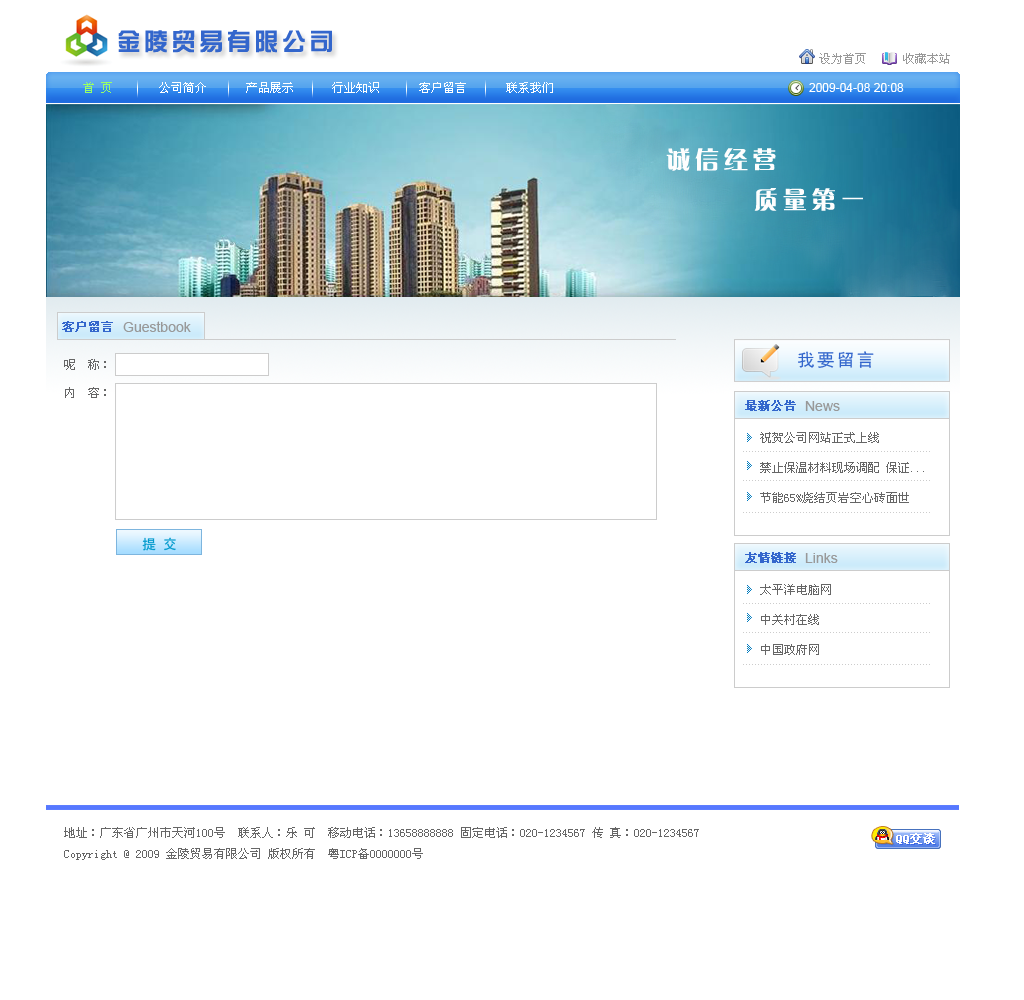
<style>
.page{position:relative;width:1024px;height:1000px;background:#ffffff}
.page>*{position:absolute;margin:0}
.t1{font:24px "HYk1gj";letter-spacing:0.15em;color:#3366cc}
.t2{font:12px "SimSun";color:#999999}
.t3{font:12px "SimSun";color:#99ff66}
.t4{font:12px "SimSun";color:#ffffff}
.t5{font:12px "ArialMT";color:#ffffff}
.t6{font:24px "FZCQJW--GB1-0";letter-spacing:0.2em;color:#fefefe}
.t7{font:12px "SimSun";color:#3366cc;font-weight:bold}
.t8{font:14px "ArialMT";color:#999999}
.t9{font:18px "SimHei";letter-spacing:0.1em;color:#3366cc}
.t10{font:12px "SimSun";color:#666666}
.t11{font:12px "SimSun";color:#666666;text-transform:uppercase}
.t12{font:14px "SimHei";color:#0099cc}
</style>
<div class="page">
<p class="t1" style="left:118px;top:30px;width:214px;height:23px">金陵贸易有限公司</p>
<p class="t2" style="left:819px;top:53px;width:47px;height:11px">设为首页</p>
<p class="t2" style="left:903px;top:53px;width:47px;height:11px">收藏本站</p>
<p class="t3" style="left:83px;top:82px;width:29px;height:11px">首 页</p>
<p class="t4" style="left:159px;top:82px;width:47px;height:11px">公司简介</p>
<p class="t4" style="left:246px;top:82px;width:47px;height:11px">产品展示</p>
<p class="t4" style="left:332px;top:82px;width:47px;height:11px">行业知识</p>
<p class="t4" style="left:419px;top:82px;width:47px;height:11px">客户留言</p>
<p class="t4" style="left:506px;top:82px;width:47px;height:11px">联系我们</p>
<p class="t5" style="left:809px;top:83px;width:95px;height:9px">2009-04-08 20:08</p>
<p class="t6" style="left:666px;top:148px;width:110px;height:23px">诚信经营</p>
<p class="t6" style="left:754px;top:188px;width:109px;height:23px">质量第一</p>
<p class="t7" style="left:62px;top:321px;width:51px;height:11px">客户留言</p>
<p class="t8" style="left:123px;top:321px;width:68px;height:11px">Guestbook</p>
<p class="t9" style="left:798px;top:351px;width:76px;height:17px">我要留言</p>
<p class="t10" style="left:64px;top:359px;width:42px;height:11px">呢  称：</p>
<p class="t10" style="left:65px;top:387px;width:41px;height:11px">内  容：</p>
<p class="t7" style="left:745px;top:400px;width:51px;height:11px">最新公告</p>
<p class="t8" style="left:805px;top:401px;width:35px;height:10px">News</p>
<p class="t11" style="left:760px;top:432px;width:119px;height:11px">祝贺公司网站正式上线</p>
<p class="t11" style="left:760px;top:462px;width:164px;height:11px">禁止保温材料现场调配 保证...</p>
<p class="t11" style="left:760px;top:492px;width:149px;height:11px">节能65%烧结页岩空心砖面世</p>
<p class="t12" style="left:142px;top:537px;width:34px;height:14px">提 交</p>
<p class="t7" style="left:745px;top:552px;width:51px;height:11px">友情链接</p>
<p class="t8" style="left:805px;top:553px;width:33px;height:10px">Links</p>
<p class="t11" style="left:760px;top:584px;width:71px;height:11px">太平洋电脑网</p>
<p class="t11" style="left:761px;top:614px;width:58px;height:11px">中关村在线</p>
<p class="t11" style="left:761px;top:644px;width:58px;height:11px">中国政府网</p>
<p class="t10" style="left:64px;top:827px;width:635px;height:33px">地址：广东省广州市天河100号  联系人：乐 可  移动电话：13658888888 固定电话：020-1234567 传 真：020-1234567<br>Copyright @ 2009 金陵贸易有限公司 版权所有  粤ICP备0000000号</p>
</div>
